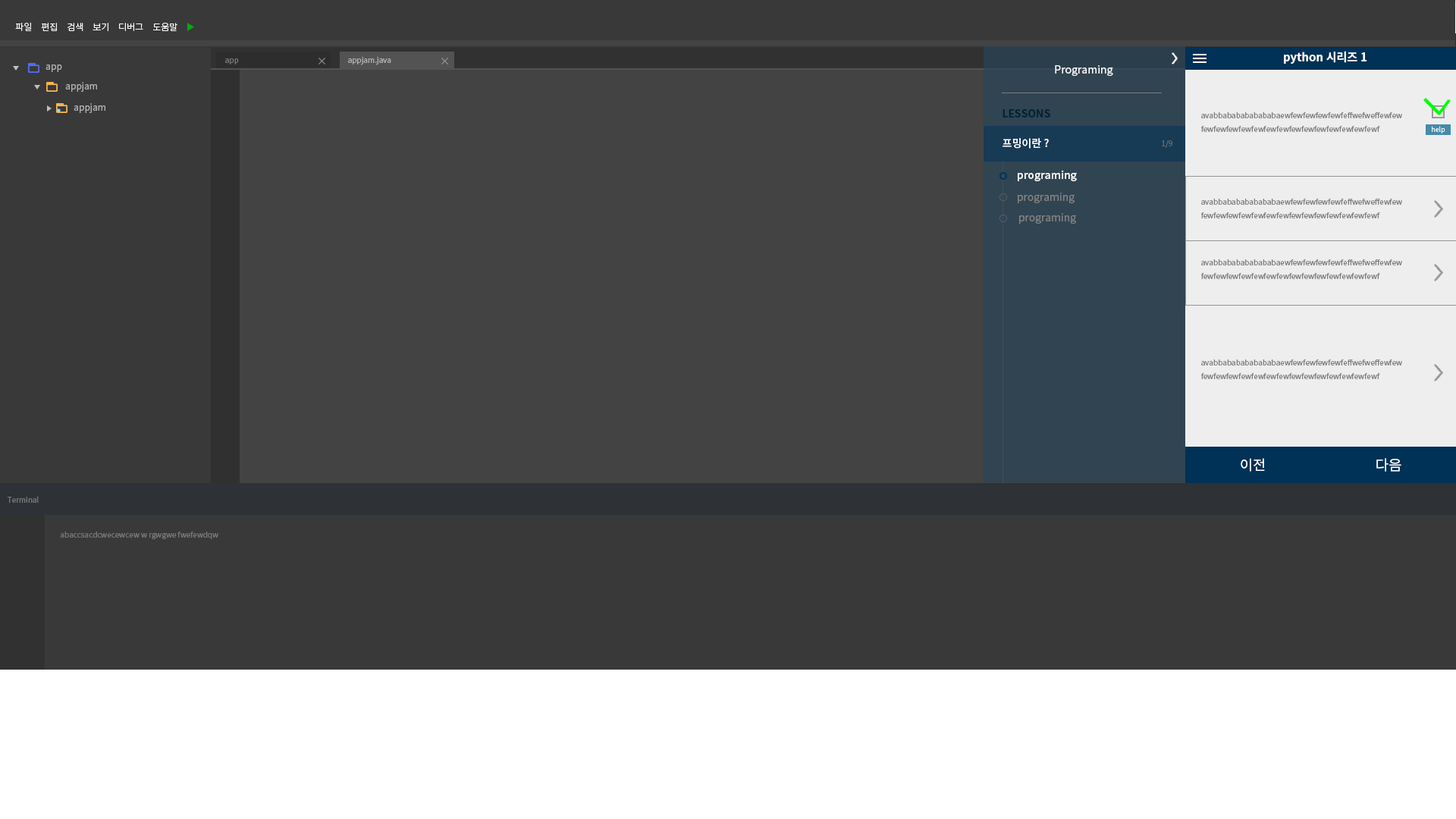
<style>
.page{position:relative;width:1456px;height:819px;background:#393939}
.page>*{position:absolute;margin:0}
.t1{font:9.1px "NotoSansCJKkr-Light";color:#ffffff}
.t2{font:11.5px "NotoSansCJKkr-Bold";color:#ffffff}
.t3{font:9.1px "NotoSansCJKkr-DemiLight";color:#b3b3b3}
.t4{font:7.6px "NotoSansCJKkr-DemiLight";color:#7b7878}
.t5{font:7.6px "NotoSansCJKkr-DemiLight";color:#b3b3b3}
.t6{font:10.6px "NotoSansCJKkr-Regular";color:#ffffff}
.t7{font:10.6px "NotoSansCJKkr-Bold";color:#002134}
.t8{font:6.8px "NotoSansCJKkr-Light";color:#ffffff}
.t9{font:10.6px "NotoSansCJKkr-Medium";color:#ffffff}
.t10{font:7.6px "NotoSansCJKkr-DemiLight";color:#6d6d6d}
.t11{font:10.6px "NotoSansCJKkr-DemiLight";color:#858585}
.t12{font:14.1px "NotoSansCJKkr-Regular";color:#ffffff}
</style>
<div class="page">
<p class="t1" style="left:15px;top:22px;width:17px;height:9px">파일</p>
<p class="t1" style="left:41px;top:23px;width:16px;height:8px">편집</p>
<p class="t1" style="left:67px;top:23px;width:16px;height:8px">검색</p>
<p class="t1" style="left:93px;top:23px;width:15px;height:8px">보기</p>
<p class="t1" style="left:119px;top:23px;width:24px;height:8px">디버그</p>
<p class="t1" style="left:153px;top:23px;width:24px;height:8px">도움말</p>
<p class="t2" style="left:1284px;top:51px;width:83px;height:13px">python 시리즈 1</p>
<p class="t3" style="left:45px;top:64px;width:17px;height:8px">app</p>
<p class="t4" style="left:225px;top:58px;width:14px;height:6px">app</p>
<p class="t5" style="left:348px;top:57px;width:43px;height:8px">appjam.java</p>
<p class="t6" style="left:1055px;top:65px;width:58px;height:11px">Programing</p>
<p class="t3" style="left:65px;top:82px;width:32px;height:10px">appjam</p>
<p class="t3" style="left:74px;top:103px;width:31px;height:10px">appjam</p>
<p class="t7" style="left:1003px;top:109px;width:47px;height:9px">LESSONS</p>
<p class="t4" style="left:1201px;top:112px;width:201px;height:20px">avabbababababababaewfewfewfewfewfeffwefweffewfew<br>fewfewfewfewfewfewfewfewfewfewfewfewfewfewf</p>
<p class="t8" style="left:1432px;top:126px;width:13px;height:7px">help</p>
<p class="t9" style="left:1003px;top:138px;width:46px;height:11px">프밍이란 ?</p>
<p class="t10" style="left:1162px;top:140px;width:10px;height:8px">1/9</p>
<p class="t9" style="left:1018px;top:170px;width:59px;height:11px">programing</p>
<p class="t11" style="left:1018px;top:193px;width:57px;height:10px">programing</p>
<p class="t4" style="left:1201px;top:199px;width:201px;height:19px">avabbababababababaewfewfewfewfewfeffwefweffewfew<br>fewfewfewfewfewfewfewfewfewfewfewfewfewfewf</p>
<p class="t11" style="left:1019px;top:213px;width:57px;height:11px">programing</p>
<p class="t4" style="left:1201px;top:259px;width:201px;height:20px">avabbababababababaewfewfewfewfewfeffwefweffewfew<br>fewfewfewfewfewfewfewfewfewfewfewfewfewfewf</p>
<p class="t4" style="left:1201px;top:359px;width:201px;height:20px">avabbababababababaewfewfewfewfewfeffwefweffewfew<br>fewfewfewfewfewfewfewfewfewfewfewfewfewfewf</p>
<p class="t12" style="left:1241px;top:458px;width:24px;height:14px">이전</p>
<p class="t12" style="left:1376px;top:458px;width:25px;height:14px">다음</p>
<p class="t4" style="left:7px;top:496px;width:32px;height:7px">Terminal</p>
<p class="t4" style="left:60px;top:532px;width:158px;height:7px">abaccsacdcwecewcew w rgwgwe fwefewdqw</p>
</div>
